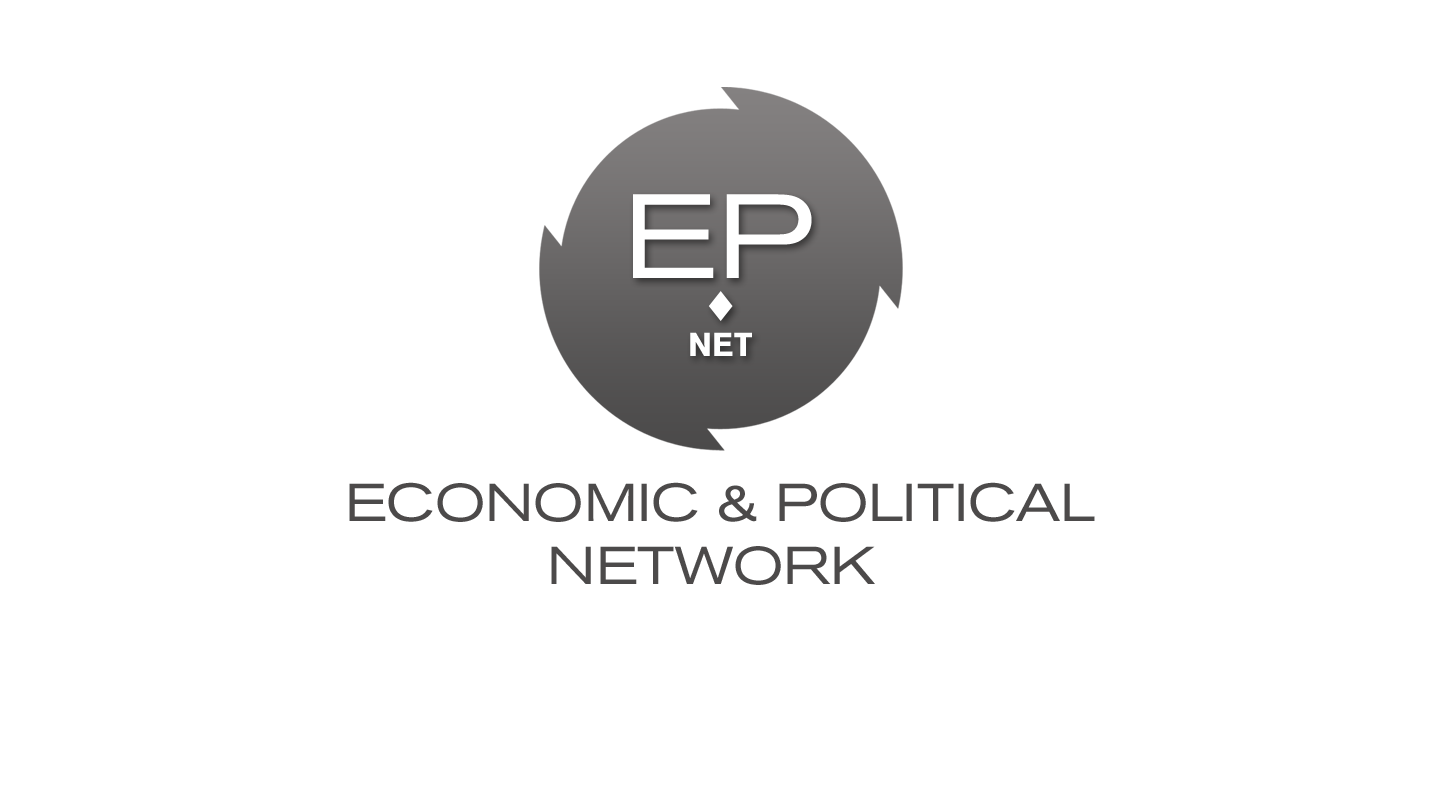
<style>
.page{position:relative;width:1440px;height:790px;background:#ffffff}
.page>*{position:absolute;margin:0}
.t1{font:118.4px "AkzidenzGroteskBQ-Ext";color:#ffffff}
.t2{font:32.8px "AkzidenzGroteskBQ-Bold";color:#ffffff}
.t3{font:52.7px "AkzidenzGroteskBQ-Ext";color:#4c4a4a}
</style>
<div class="page">
<p class="t1" style="left:633px;top:194px;width:179px;height:84px">EP</p>
<p class="t2" style="left:690px;top:332px;width:62px;height:24px">NET</p>
<p class="t3" style="left:349px;top:482px;width:746px;height:103px;text-align:center">ECONOMIC &amp; POLITICAL<br>NETWORK</p>
</div>
